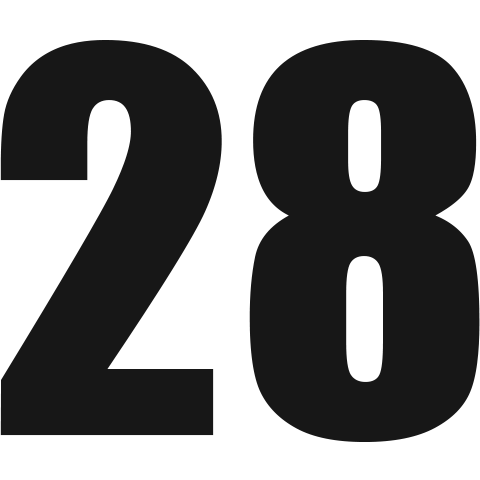
<style>
.page{position:relative;width:480px;height:480px;background:#171717}
.page>*{position:absolute;margin:0}
.t1{font:490.3px "Impact";color:#171717}
</style>
<div class="page">
<p class="t1" style="left:0px;top:40px;width:480px;height:402px">28</p>
</div>
